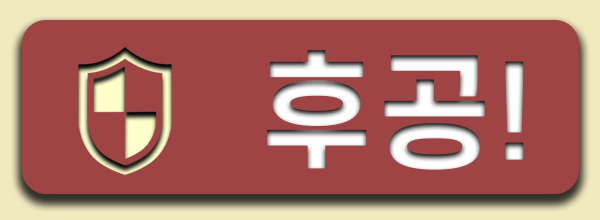
<style>
.page{position:relative;width:600px;height:220px;background:#9e4444}
.page>*{position:absolute;margin:0}
.t1{font:121.2px "S-CoreDream-6Bold";font-weight:bold}
</style>
<div class="page">
<p class="t1" style="left:267px;top:50px;width:257px;height:120px">후공!</p>
</div>
